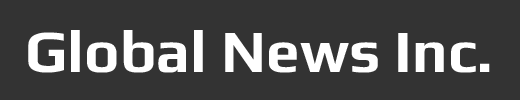
<style>
.page{position:relative;width:520px;height:100px;background:#333333}
.page>*{position:absolute;margin:0}
.t1{font:60px "Play-Bold";color:#ffffff}
</style>
<div class="page">
<p class="t1" style="left:28px;top:30px;width:462px;height:43px">Global News Inc.</p>
</div>
